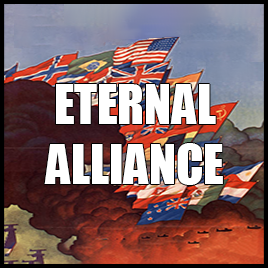
<style>
.page{position:relative;width:268px;height:268px}
.page>*{position:absolute;margin:0}
.t1{font:50px "Impact";color:#ffffff}
</style>
<div class="page">
<p class="t1" style="left:44px;top:84px;width:179px;height:101px;text-align:center">ETERNAL<br>ALLIANCE</p>
</div>
